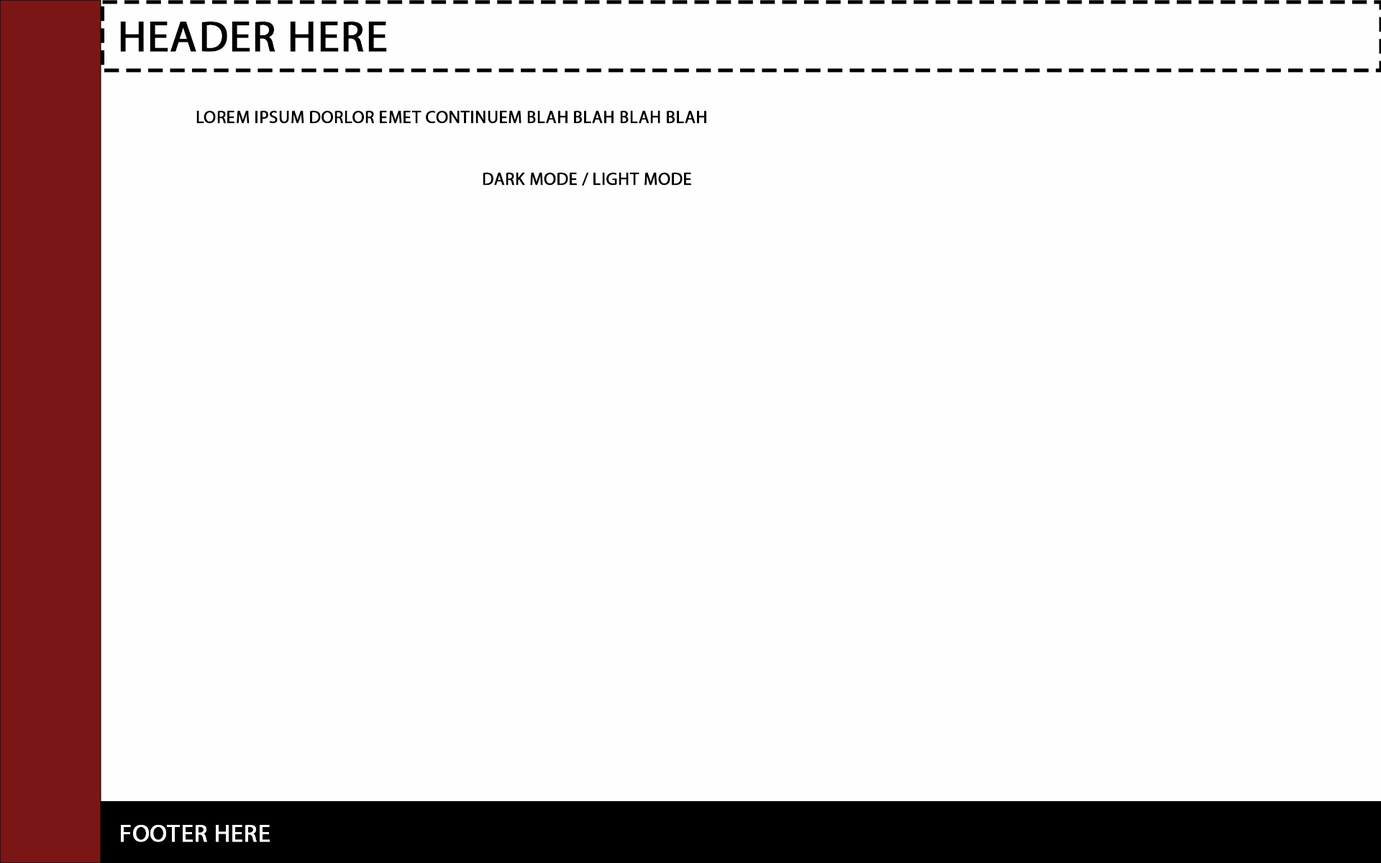
<style>
.page{position:relative;width:1381px;height:863px;background:#fefefe}
.page>*{position:absolute;margin:0}
.t1{font:43.2px "MyriadPro-Regular";letter-spacing:-0.005em;color:#000000;text-transform:uppercase;font-weight:bold}
.t2{font:17.3px "MyriadPro-Regular";letter-spacing:-0.005em;color:#000000;text-transform:uppercase;font-weight:bold}
.t3{font:24.5px "MyriadPro-Regular";letter-spacing:-0.005em;color:#fefefe;text-transform:uppercase;font-weight:bold}
</style>
<div class="page">
<p class="t1" style="left:120px;top:22px;width:267px;height:30px">Header here</p>
<p class="t2" style="left:196px;top:111px;width:510px;height:13px">lorem ipsum dorlor emet continuem blah blah blah blah</p>
<p class="t2" style="left:483px;top:173px;width:208px;height:13px">dark mode / light mode</p>
<p class="t3" style="left:121px;top:825px;width:149px;height:17px">Footer Here</p>
</div>
